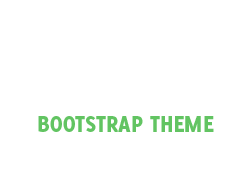
<style>
.page{position:relative;width:252px;height:182px;background:#ffffff}
.page>*{position:absolute;margin:0}
.t1{font:25px "Delicious-Heavy";color:#62c462}
</style>
<div class="page">
<p class="t1" style="left:38px;top:116px;width:176px;height:16px">BOOTSTRAP THEME</p>
</div>
